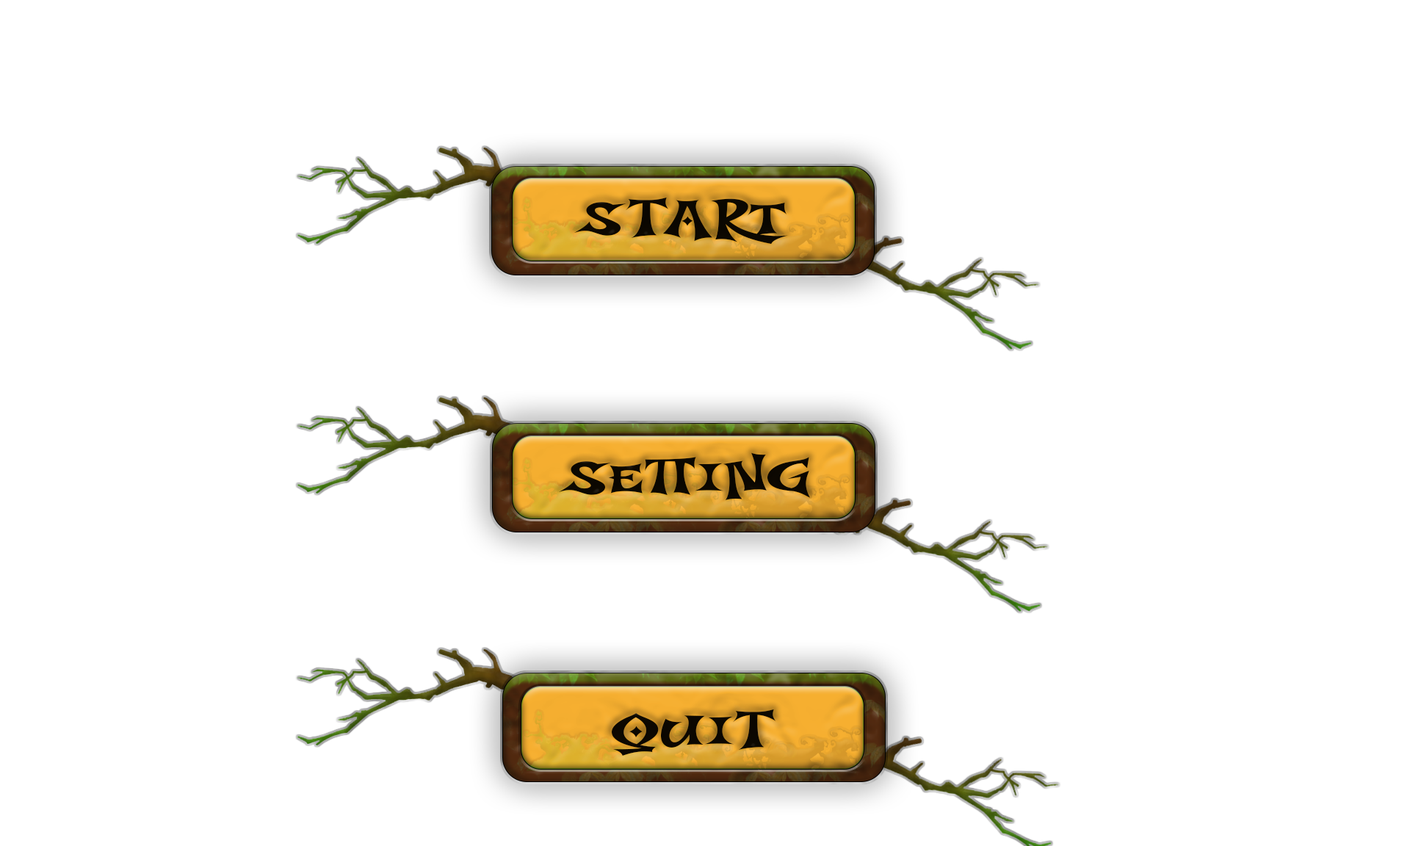
<style>
.page{position:relative;width:1410px;height:846px;background:#ffffff}
.page>*{position:absolute;margin:0}
.t1{font:45.5px "TreeNight";letter-spacing:-0.025em;color:#0e0901;scale:1.92 1}
</style>
<div class="page">
<p class="t1" style="left:574px;top:197px;width:214px;height:48px;rotate:-1deg">start</p>
<p class="t1" style="left:559px;top:452px;width:252px;height:48px;rotate:-1deg">setting</p>
<p class="t1" style="left:612px;top:709px;width:164px;height:47px;rotate:-1deg">quit</p>
</div>
